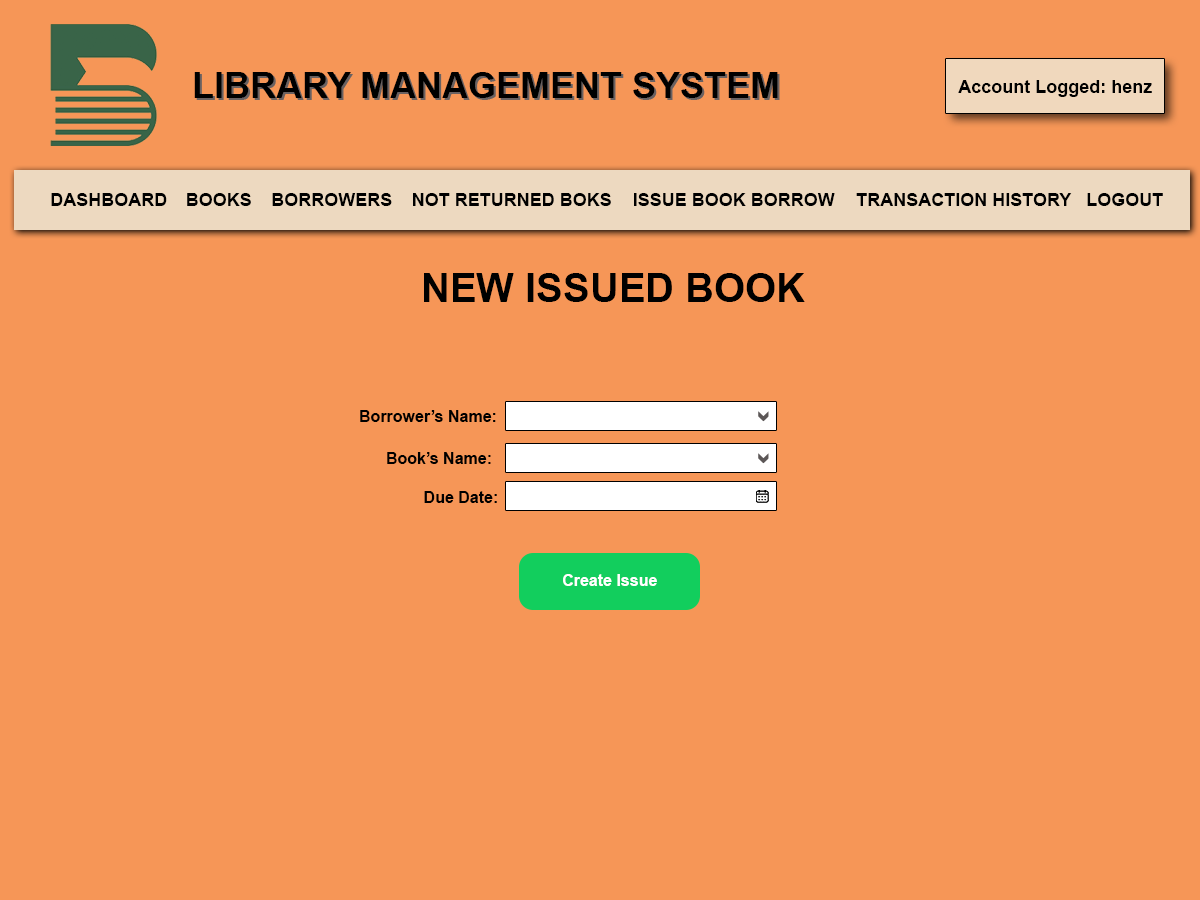
<style>
.page{position:relative;width:1200px;height:900px;background:#f69657}
.page>*{position:absolute;margin:0}
.t1{font:36px "Arial-BoldMT";color:#000000}
.t2{font:18px "Arial-BoldMT";color:#000000}
.t3{font:40px "Arial-BoldMT";color:#000000}
.t4{font:16px "Arial-BoldMT";color:#000000}
.t5{font:16px "Arial-BoldMT";color:#ffffff}
</style>
<div class="page">
<p class="t1" style="left:194px;top:72px;width:584px;height:26px">LIBRARY MANAGEMENT SYSTEM</p>
<p class="t2" style="left:958px;top:80px;width:194px;height:17px">Account Logged: henz</p>
<p class="t2" style="left:51px;top:193px;width:116px;height:13px">DASHBOARD</p>
<p class="t2" style="left:187px;top:193px;width:64px;height:13px">BOOKS</p>
<p class="t2" style="left:272px;top:193px;width:120px;height:13px">BORROWERS</p>
<p class="t2" style="left:413px;top:193px;width:198px;height:13px">NOT RETURNED BOKS</p>
<p class="t2" style="left:634px;top:193px;width:201px;height:13px">ISSUE BOOK BORROW</p>
<p class="t2" style="left:856px;top:193px;width:216px;height:13px">TRANSACTION HISTORY</p>
<p class="t2" style="left:1087px;top:193px;width:76px;height:13px">LOGOUT</p>
<p class="t3" style="left:424px;top:273px;width:381px;height:29px">NEW ISSUED BOOK</p>
<p class="t4" style="left:360px;top:410px;width:136px;height:12px">Borrower’s Name:</p>
<p class="t4" style="left:387px;top:452px;width:104px;height:12px">Book’s Name:</p>
<p class="t4" style="left:424px;top:491px;width:73px;height:12px">Due Date:</p>
<p class="t5" style="left:563px;top:574px;width:94px;height:12px">Create Issue</p>
</div>
